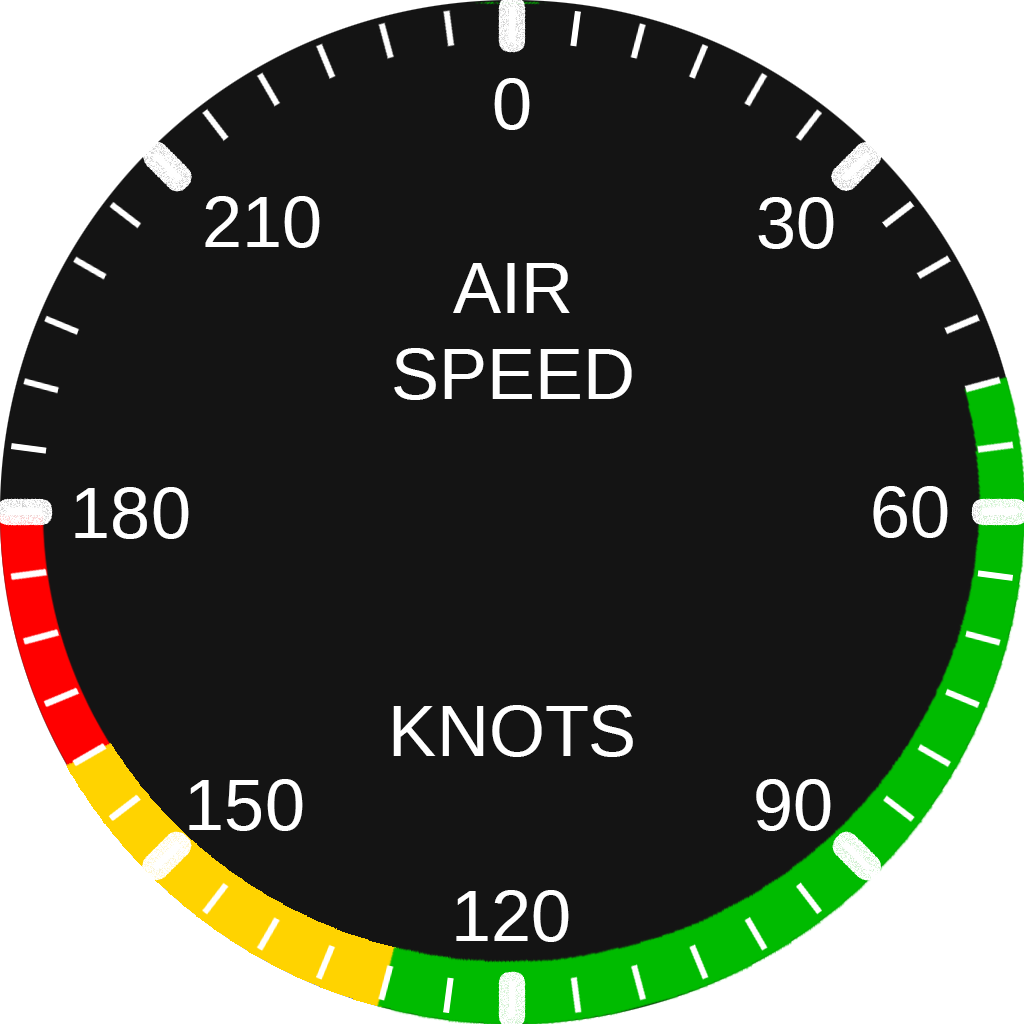
<style>
.page{position:relative;width:1024px;height:1024px;background:#141414}
.page>*{position:absolute;margin:0}
.t1{font:72px "LiberationSans";color:#ffffff}
</style>
<div class="page">
<p class="t1" style="left:494px;top:78px;width:36px;height:52px">0</p>
<p class="t1" style="left:205px;top:196px;width:115px;height:52px">210</p>
<p class="t1" style="left:758px;top:197px;width:76px;height:52px">30</p>
<p class="t1" style="left:394px;top:263px;width:238px;height:137px;text-align:center">AIR<br>SPEED</p>
<p class="t1" style="left:873px;top:486px;width:75px;height:52px">60</p>
<p class="t1" style="left:75px;top:487px;width:114px;height:52px">180</p>
<p class="t1" style="left:393px;top:705px;width:240px;height:52px">KNOTS</p>
<p class="t1" style="left:189px;top:779px;width:114px;height:52px">150</p>
<p class="t1" style="left:756px;top:779px;width:75px;height:52px">90</p>
<p class="t1" style="left:456px;top:890px;width:113px;height:52px">120</p>
</div>
